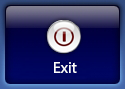
<style>
.page{position:relative;width:125px;height:89px}
.page>*{position:absolute;margin:0}
.t1{font:16px "MyriadPro-Regular";color:#fdfdfd}
</style>
<div class="page">
<p class="t1" style="left:54px;top:62px;width:23px;height:11px">Exit</p>
</div>
